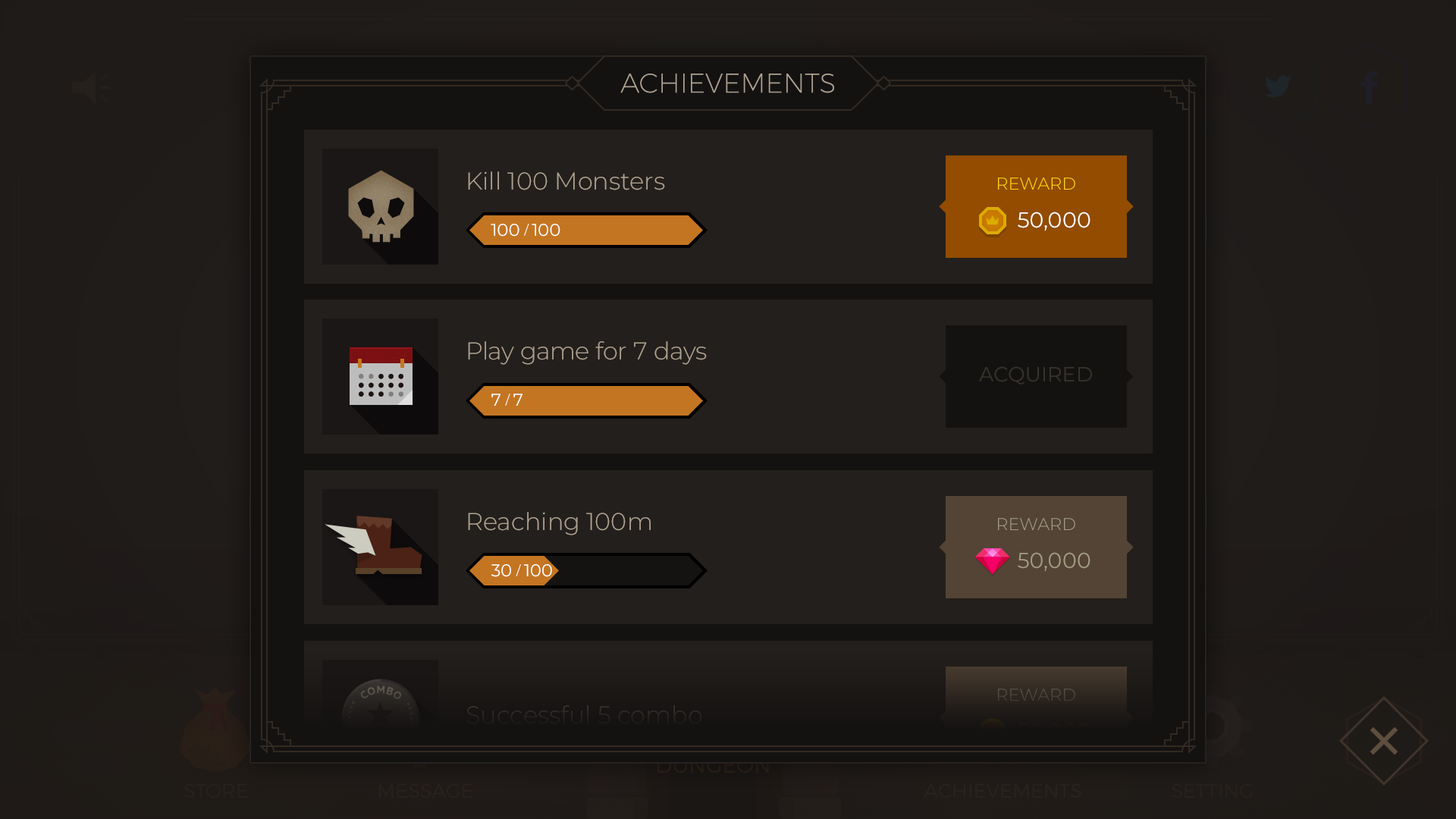
<style>
.page{position:relative;width:1456px;height:819px;background:#231f1c}
.page>*{position:absolute;margin:0}
.t1{font:27.2px "Montserrat-UltraLight";color:#aea190;text-transform:uppercase}
.t2{font:24.3px "Montserrat-Light";color:#aea190}
.t3{font:17.1px "Montserrat-Light";color:#ffd916;text-transform:uppercase}
.t4{font:21.6px "Montserrat-Regular";color:#ffffff}
.t5{font:17.1px "Montserrat-Regular";color:#ffffff}
.t6{font:12.5px "Montserrat-Regular";color:#ffffff}
.t7{font:20.5px "Montserrat-Regular";color:#36332b;text-transform:uppercase}
.t8{font:17.1px "Montserrat-Light";color:#a39d83;text-transform:uppercase}
.t9{font:21.6px "Montserrat-Regular";color:#a39d83}
.t10{font:10.7px "Quicksand-Bold";color:#555145;text-transform:uppercase}
.t11{font:17.1px "Montserrat-Light";color:#4c483d;text-transform:uppercase}
.t12{font:24.3px "Montserrat-Light";color:#262320}
</style>
<div class="page">
<p class="t1" style="left:620px;top:74px;width:214px;height:19px">Achievements</p>
<p class="t2" style="left:468px;top:171px;width:197px;height:19px">Kill 100 Monsters</p>
<p class="t3" style="left:998px;top:177px;width:77px;height:13px">Reward</p>
<p class="t4" style="left:1018px;top:212px;width:72px;height:19px">50,000</p>
<p class="t5" style="left:491px;top:224px;width:69px;height:13px">100 <span class="t6">/ </span>100</p>
<p class="t2" style="left:468px;top:341px;width:239px;height:24px">Play game for 7 days</p>
<p class="t7" style="left:979px;top:366px;width:113px;height:18px">Acquired</p>
<p class="t5" style="left:491px;top:394px;width:31px;height:12px">7 <span class="t6">/ </span>7</p>
<p class="t2" style="left:468px;top:512px;width:183px;height:23px">Reaching 100m</p>
<p class="t8" style="left:998px;top:518px;width:77px;height:12px">Reward</p>
<p class="t9" style="left:1018px;top:552px;width:72px;height:20px">50,000</p>
<p class="t5" style="left:491px;top:564px;width:61px;height:13px">30 <span class="t6">/ </span>100</p>
<p class="t10" style="left:360px;top:686px;width:41px;height:13px;rotate:1deg">COMBO</p>
<p class="t11" style="left:998px;top:689px;width:77px;height:12px">Reward</p>
<p class="t12" style="left:466px;top:705px;width:236px;height:19px">Successful 5 combo</p>
</div>
